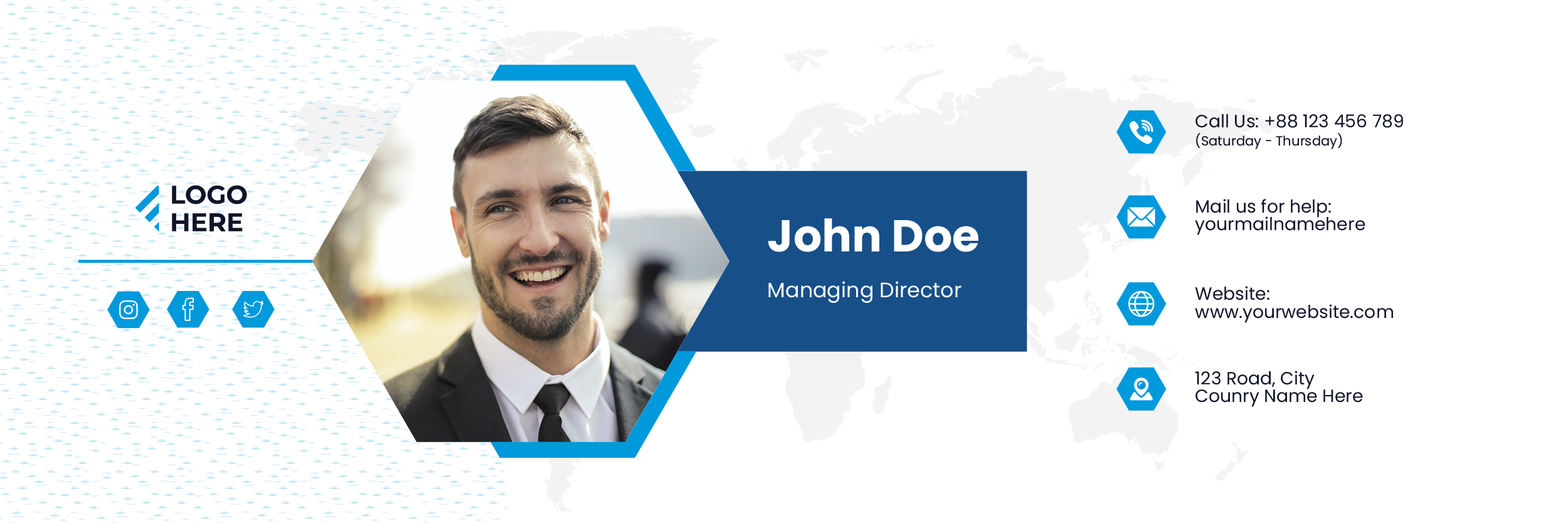
<style>
.page{position:relative;width:1568px;height:523px;background:#ffffff}
.page>*{position:absolute;margin:0}
.t1{font:17.7px/17.7px "Poppins-Regular";color:#111428}
.t2{font:13.3px/17.7px "Poppins-Regular";color:#111428}
.t3{font:44.7px "Poppins-Bold";color:#ffffff}
.t4{font:20.9px "Poppins-Regular";color:#ffffff}
</style>
<div class="page">
<p class="t1" style="left:1195px;top:114px;width:208px;height:35px">Call Us: +88 123 456 789<br><span class="t2">(Saturday - Thursday)</span></p>
<p class="t1" style="left:1195px;top:199px;width:170px;height:36px">Mail us for help:<br>yourmailnamehere</p>
<p class="t3" style="left:768px;top:218px;width:210px;height:34px">John Doe</p>
<p class="t4" style="left:768px;top:281px;width:193px;height:22px">Managing Director</p>
<p class="t1" style="left:1195px;top:286px;width:198px;height:37px">Website:<br>www.yourwebsite.com</p>
<p class="t1" style="left:1195px;top:371px;width:168px;height:36px">123 Road, City<br>Counry Name Here</p>
</div>
